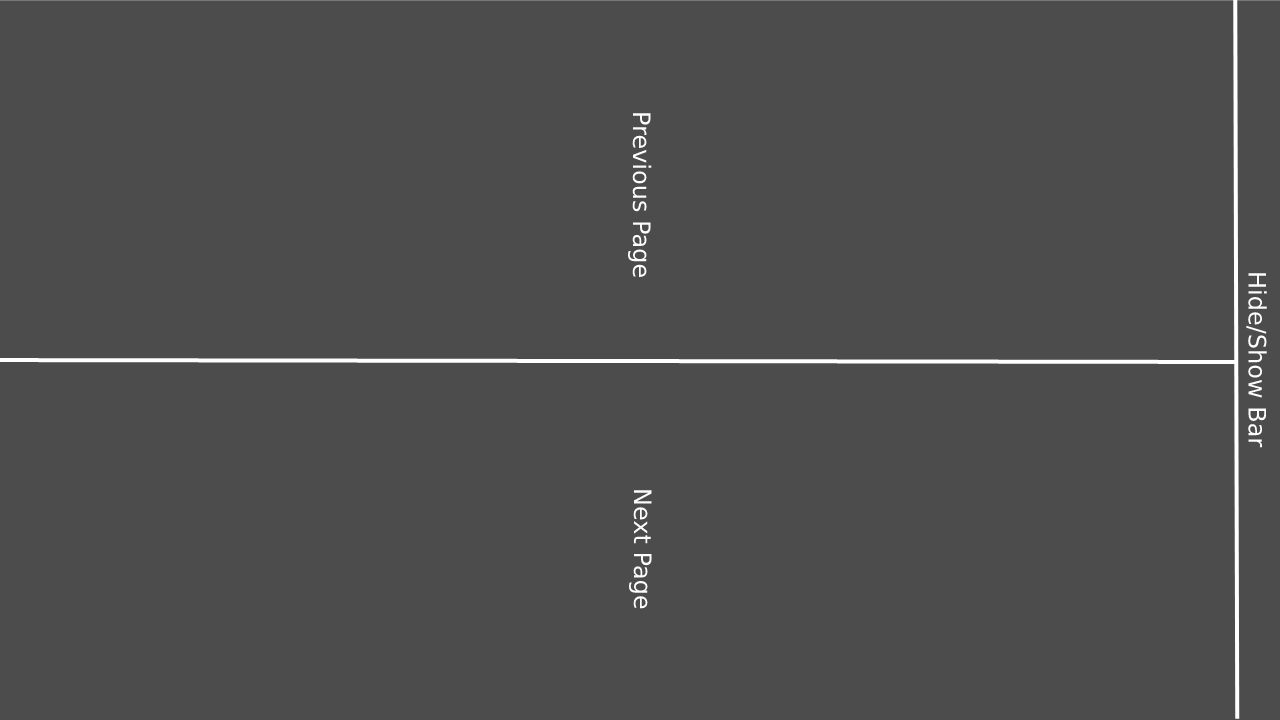
<style>
.page{position:relative;width:1280px;height:720px;background:#4c4c4c}
.page>*{position:absolute;margin:0}
.t1{font:24px "DejaVuSans";color:#fdfdfd}
</style>
<div class="page">
<p class="t1" style="left:628px;top:113px;width:24px;height:164px;rotate:90deg">Previous Page</p>
<p class="t1" style="left:1246px;top:273px;width:21px;height:175px;rotate:90deg">Hide/Show Bar</p>
<p class="t1" style="left:629px;top:490px;width:23px;height:119px;rotate:90deg">Next Page</p>
</div>
